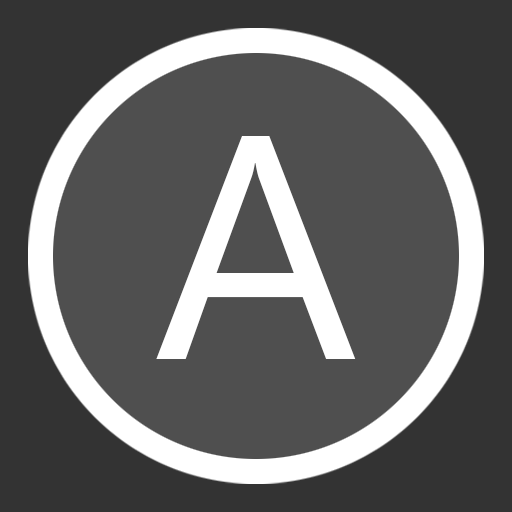
<style>
.page{position:relative;width:512px;height:512px;background:#4f4f4f}
.page>*{position:absolute;margin:0}
.t1{font:318.8px "SegoeUI";color:#ffffff}
</style>
<div class="page">
<p class="t1" style="left:156px;top:136px;width:200px;height:223px">A</p>
</div>
